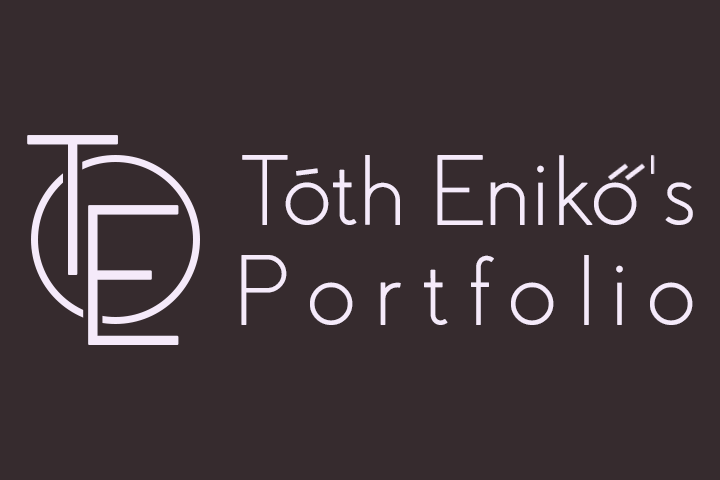
<style>
.page{position:relative;width:720px;height:480px;background:#362b2e}
.page>*{position:absolute;margin:0}
.t1{font:200px "Coves-Light";color:#f5eafa}
.t2{font:100px "Coves-Light";color:#f5eafa}
.t3{font:100px "Coves-Light";letter-spacing:0.167em;color:#f5eafa}
</style>
<div class="page">
<p class="t1" style="left:27px;top:135px;width:91px;height:140px">T</p>
<p class="t2" style="left:242px;top:155px;width:451px;height:70px">Tóth Eniko s</p>
<p class="t1" style="left:88px;top:205px;width:91px;height:140px">E</p>
<p class="t3" style="left:241px;top:255px;width:452px;height:70px">Portfolio</p>
</div>
